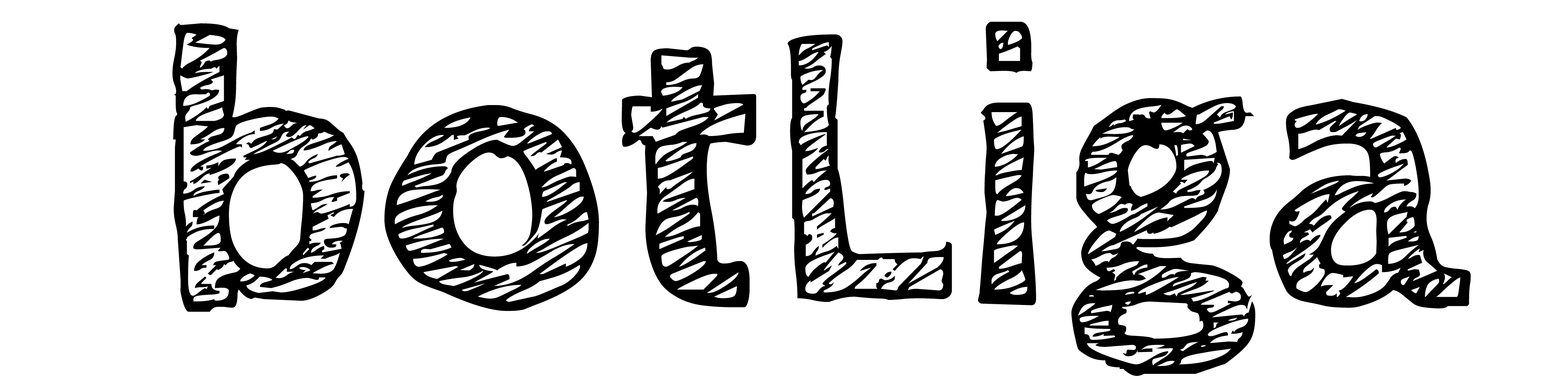
<style>
.page{position:relative;width:1568px;height:392px;background:#ffffff}
.page>*{position:absolute;margin:0}
.t1{font:408.3px "CabinSketch-Bold";color:#000000}
</style>
<div class="page">
<p class="t1" style="left:172px;top:22px;width:1299px;height:354px">botLiga</p>
</div>
